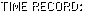
<style>
.page{position:relative;width:85px;height:12px;background:#ffffff}
.page>*{position:absolute;margin:0}
.t1{font:12px "Geneva";color:#000000}
</style>
<div class="page">
<p class="t1" style="left:1px;top:2px;width:81px;height:9px">TIME RECORD:</p>
</div>
